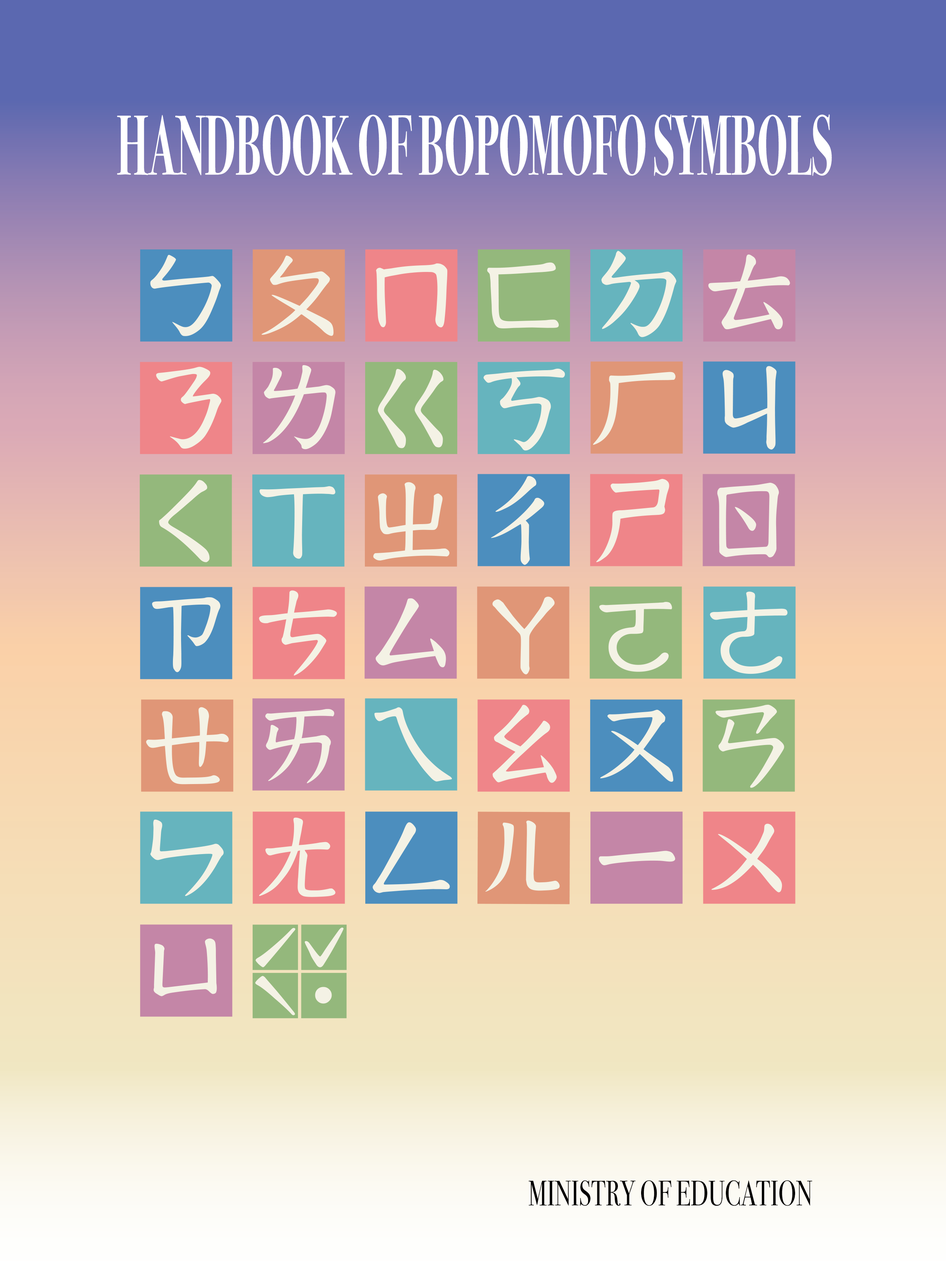
<style>
.page{position:relative;width:946px;height:1261px}
.page>*{position:absolute;margin:0}
.t1{font:85.1px "BodoniSvtyTwoOSITCTT-Bold";color:#ffffff;text-transform:uppercase;scale:0.5 1}
.t2{font:35.5px "BodoniSvtyTwoOSITCTT-Book";color:#010000;text-transform:uppercase;scale:0.7 1}
</style>
<div class="page">
<p class="t1" style="left:117px;top:114px;width:715px;height:62px">Handbook of Bopomofo Symbols</p>
<p class="t2" style="left:528px;top:1180px;width:284px;height:26px">MINISTRY OF EDUCATION</p>
</div>
